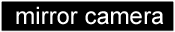
<style>
.page{position:relative;width:175px;height:32px;background:#000000}
.page>*{position:absolute;margin:0}
.t1{font:24px "ArialMT";color:#ffffff}
</style>
<div class="page">
<p class="t1" style="left:16px;top:6px;width:148px;height:19px">mirror camera</p>
</div>
